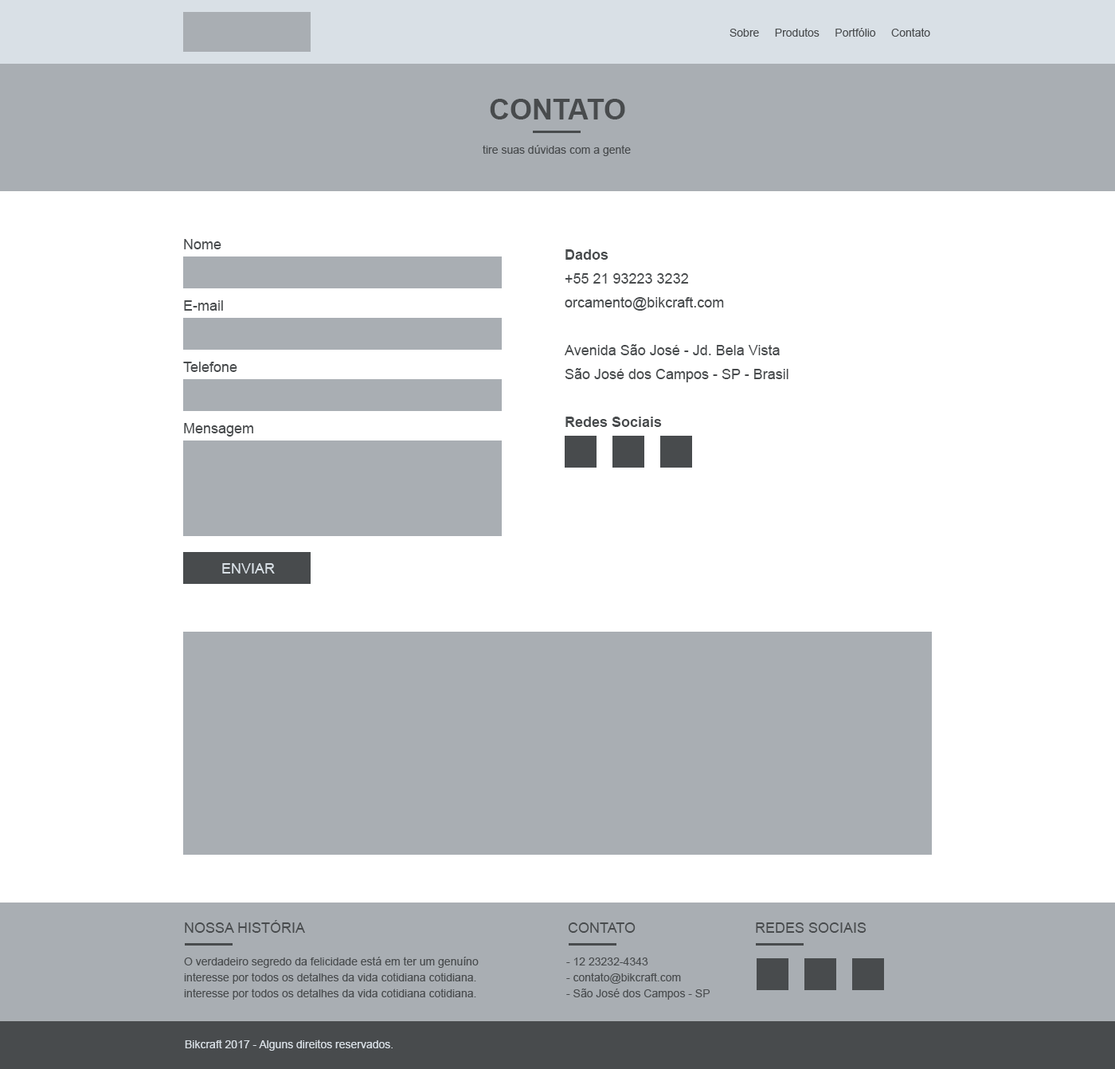
<style>
.page{position:relative;width:1115px;height:1069px;background:#ffffff}
.page>*{position:absolute;margin:0}
.t1{font:11.2px "ArialMT";color:#484b4d}
.t2{font:28.7px "Arial-BoldMT";color:#484b4d;text-transform:uppercase}
.t3{font:14.3px "ArialMT";color:#484b4d}
.t4{font:14.3px/23.9px "ArialMT";color:#484b4d}
.t5{font:14.3px/23.9px "Arial-BoldMT";color:#484b4d}
.t6{font:14.3px "ArialMT";color:#d9e0e6}
.t7{font:14.3px "ArialMT";color:#484b4d;text-transform:uppercase}
.t8{font:11.2px/15.9px "ArialMT";color:#484b4d}
.t9{font:11.2px "ArialMT";color:#d9e0e6}
</style>
<div class="page">
<p class="t1" style="left:730px;top:28px;width:201px;height:9px">Sobre     Produtos     Portfólio     Contato</p>
<p class="t2" style="left:490px;top:99px;width:135px;height:21px">CONTATO</p>
<p class="t1" style="left:483px;top:145px;width:148px;height:11px">tire suas dúvidas com a gente</p>
<p class="t3" style="left:184px;top:239px;width:37px;height:10px">Nome</p>
<p class="t4" style="left:564px;top:249px;width:225px;height:178px"><span class="t5">Dados<br></span>+55 21 93223 3232<br>orcamento@bikcraft.com<br><br>Avenida São José - Jd. Bela Vista<br>São José dos Campos - SP - Brasil<br><br><span class="t5">Redes Sociais</span></p>
<p class="t3" style="left:184px;top:300px;width:39px;height:11px">E-mail</p>
<p class="t3" style="left:183px;top:362px;width:54px;height:10px">Telefone</p>
<p class="t3" style="left:184px;top:423px;width:69px;height:14px">Mensagem</p>
<p class="t6" style="left:222px;top:563px;width:53px;height:11px">ENVIAR</p>
<p class="t7" style="left:185px;top:920px;width:120px;height:13px">Nossa História</p>
<p class="t7" style="left:568px;top:923px;width:68px;height:10px">Contato</p>
<p class="t7" style="left:756px;top:923px;width:111px;height:10px">Redes sociais</p>
<p class="t8" style="left:184px;top:957px;width:295px;height:43px">O verdadeiro segredo da felicidade está em ter um genuíno interesse por todos os detalhes da vida cotidiana cotidiana.<br>interesse por todos os detalhes da vida cotidiana cotidiana.</p>
<p class="t8" style="left:566px;top:958px;width:144px;height:42px">- 12 23232-4343<br>- contato@bikcraft.com<br>- São José dos Campos - SP</p>
<p class="t9" style="left:185px;top:1040px;width:208px;height:11px">Bikcraft 2017 - Alguns direitos reservados.</p>
</div>
